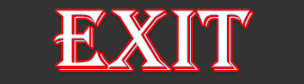
<style>
.page{position:relative;width:304px;height:84px;background:#333333}
.page>*{position:absolute;margin:0}
.t1{font:88.9px "Algerian";color:#ffffff}
</style>
<div class="page">
<p class="t1" style="left:54px;top:10px;width:198px;height:60px">EXIT</p>
</div>
